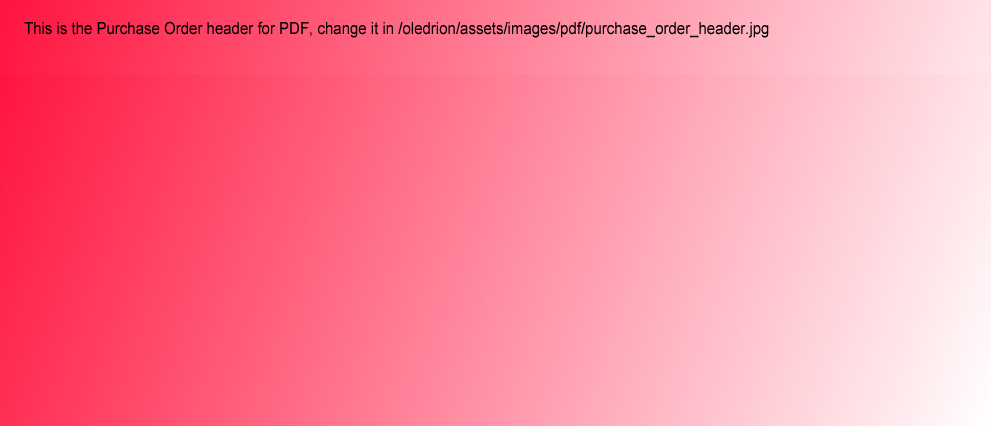
<style>
.page{position:relative;width:991px;height:426px}
.page>*{position:absolute;margin:0}
.t1{font:16.7px "ArialMT";color:#000001;scale:0.9 1}
</style>
<div class="page">
<p class="t1" style="left:24px;top:21px;width:745px;height:17px">This is the Purchase Order header for PDF, change it in /oledrion/assets/images/pdf/purchase_order_header.jpg</p>
</div>
